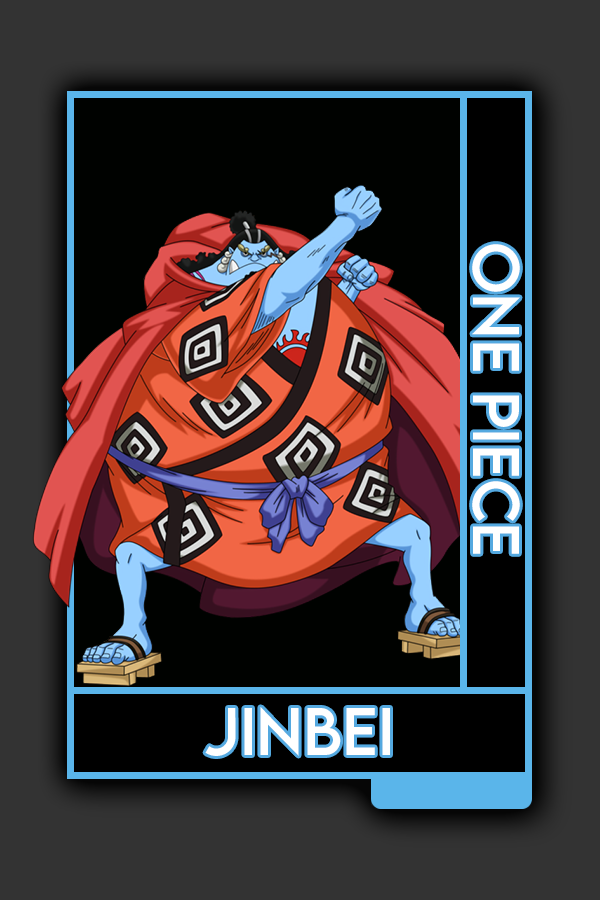
<style>
.page{position:relative;width:600px;height:900px;background:#333333}
.page>*{position:absolute;margin:0}
.t1{font:58.4px "LEMONMILK-Regular";color:#ffffff}
.t2{font:60.3px "LEMONMILK-Regular";color:#ffffff}
</style>
<div class="page">
<p class="t1" style="left:472px;top:244px;width:48px;height:310px;rotate:90deg">One Piece</p>
<p class="t2" style="left:205px;top:707px;width:185px;height:49px">Jinbei</p>
</div>
